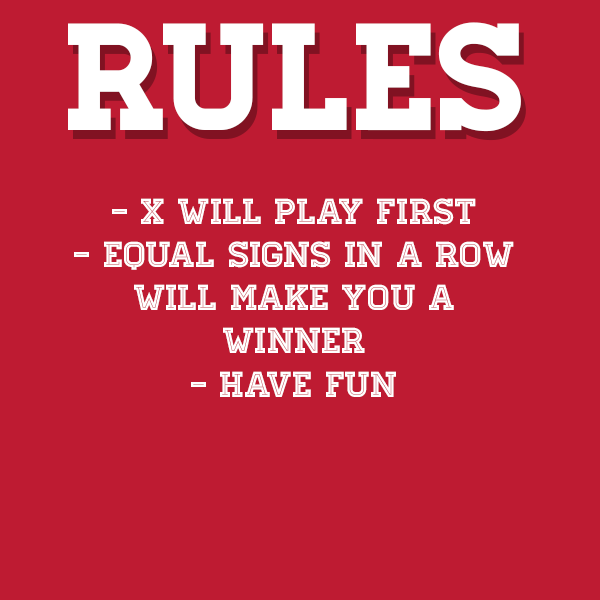
<style>
.page{position:relative;width:600px;height:600px;background:#be1b32}
.page>*{position:absolute;margin:0}
.t1{font:152px "Homestead-Regular";color:#ffffff}
.t2{font:36px "Homestead-Inline";color:#ffffff}
</style>
<div class="page">
<p class="t1" style="left:68px;top:22px;width:453px;height:110px">RULES</p>
<p class="t2" style="left:74px;top:198px;width:440px;height:199px;text-align:center">- x will play first<br>- Equal signs in a row will make you a winner<br>- have fun</p>
</div>
